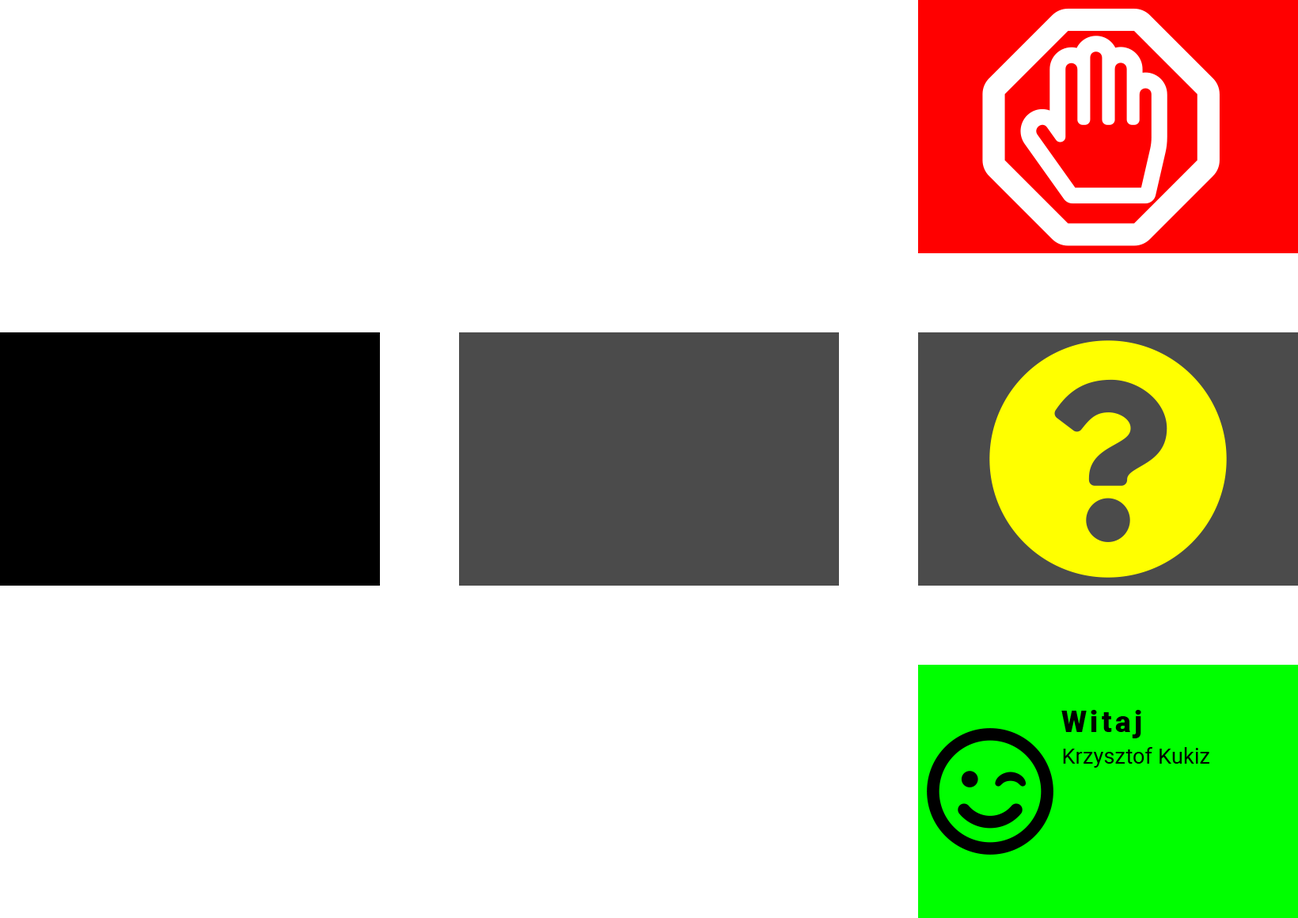
<style>
.page{position:relative;width:1298px;height:918px;background:#ffffff}
.page>*{position:absolute;margin:0}
.t1{font:29px "Roboto-Black";letter-spacing:0.12em;color:#000000}
.t2{font:21.7px "Roboto-Regular";color:#000000}
</style>
<div class="page">
<p class="t1" style="left:1062px;top:710px;width:80px;height:29px">Witaj</p>
<p class="t2" style="left:1063px;top:747px;width:147px;height:21px">Krzysztof Kukiz</p>
</div>
